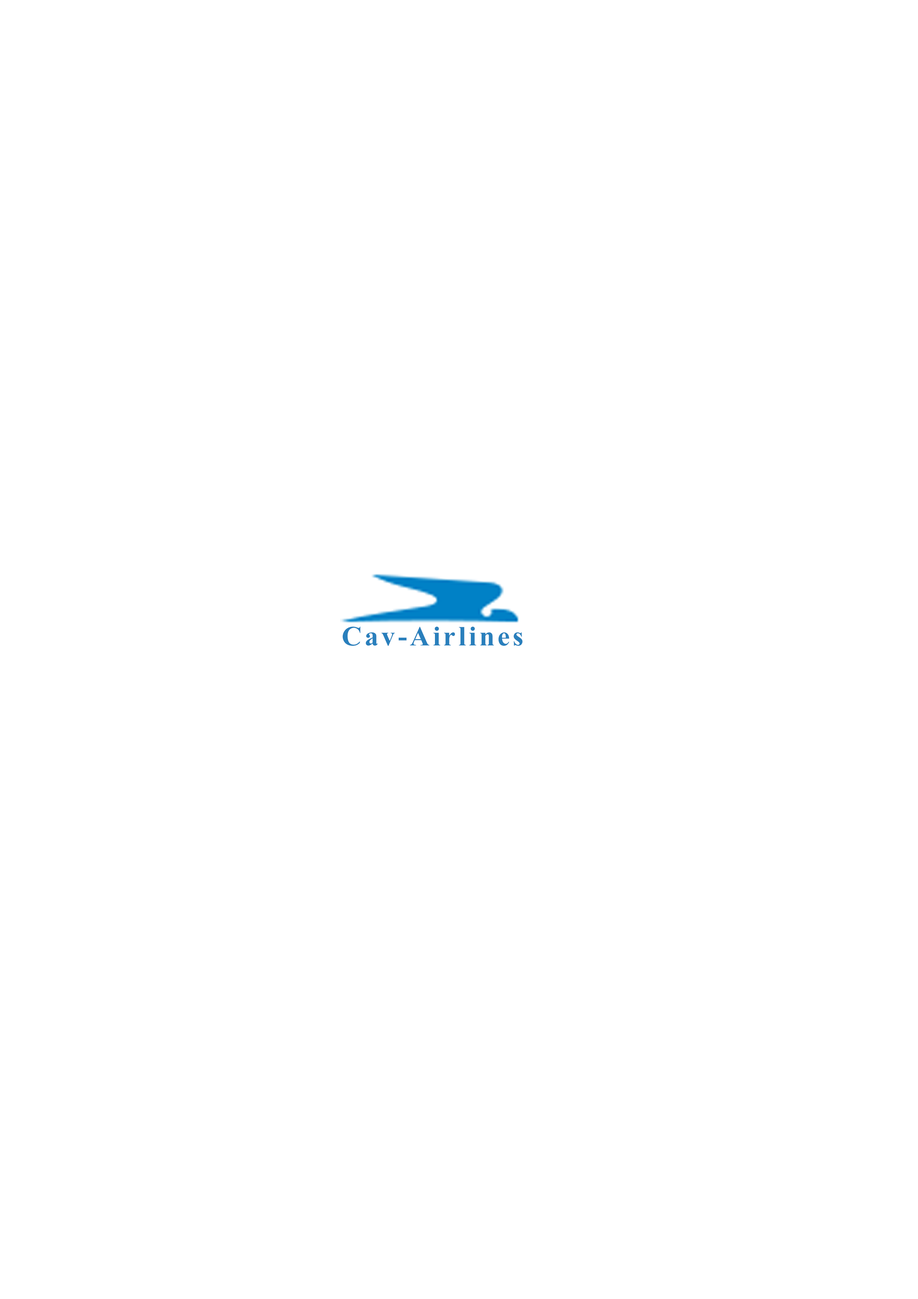
<style>
.page{position:relative;width:918px;height:1299px;background:#ffffff}
.page>*{position:absolute;margin:0}
.t1{font:27.8px "TimesNewRomanPS-BoldMT";letter-spacing:0.1em;color:#297fbc}
</style>
<div class="page">
<p class="t1" style="left:342px;top:626px;width:181px;height:20px">Cav-Airlines</p>
</div>
